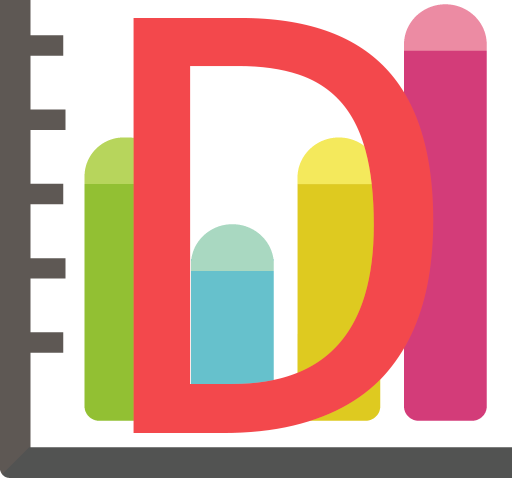
<style>
.page{position:relative;width:513px;height:478px;background:#ffffff}
.page>*{position:absolute;margin:0}
.t1{font:650px "Consolas";color:#f3484c}
</style>
<div class="page">
<p class="t1" style="left:133px;top:18px;width:301px;height:415px">D</p>
</div>
